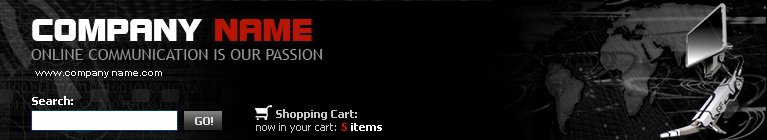
<style>
.page{position:relative;width:767px;height:140px;background:#000000}
.page>*{position:absolute;margin:0}
.t1{font:30px "BoltBoldITCbyBT-Regular";color:#ffffff;text-transform:uppercase}
.t2{font:30px "BoltBoldITCbyBT-Regular";color:#b81505;text-transform:uppercase}
.t3{font:16px "UltraVertex6";color:#949393;text-transform:uppercase}
.t4{font:10px "Arial-BoldMT";color:#ffffff}
.t5{font:11px "Tahoma-Bold";color:#ffffff}
.t6{font:11px "Tahoma-Bold";color:#c7c7c7}
.t7{font:11px "Tahoma-Bold";color:#e0e0e0;text-transform:uppercase}
.t8{font:11px "Tahoma";color:#c7c7c7}
.t9{font:11px "Tahoma-Bold";color:#cb1200}
</style>
<div class="page">
<p class="t1" style="left:32px;top:19px;width:280px;height:22px">Company <span class="t2">Name</span></p>
<p class="t3" style="left:31px;top:49px;width:291px;height:11px">online communication is our passion</p>
<p class="t4" style="left:35px;top:71px;width:127px;height:7px">www.company name.com</p>
<p class="t5" style="left:32px;top:96px;width:41px;height:9px">Search:</p>
<p class="t6" style="left:276px;top:109px;width:81px;height:11px">Shopping Cart:</p>
<p class="t7" style="left:195px;top:117px;width:18px;height:8px">GO!</p>
<p class="t8" style="left:256px;top:123px;width:126px;height:10px">now in your cart: <span class="t9">5</span><span class="t5"> items</span></p>
</div>
